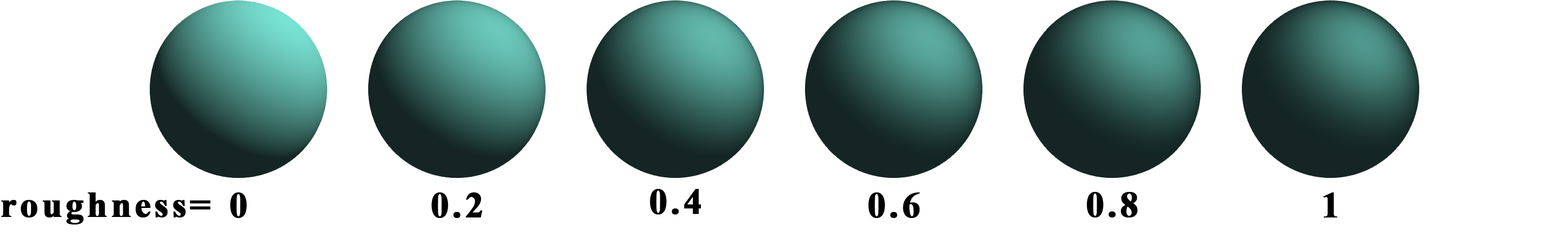
<style>
.page{position:relative;width:1568px;height:234px;background:#ffffff}
.page>*{position:absolute;margin:0}
.t1{font:36.1px "TimesNewRomanPS-BoldMT";letter-spacing:0.075em;color:#000000;font-weight:bold}
</style>
<div class="page">
<p class="t1" style="left:1px;top:192px;width:209px;height:32px">roughness=</p>
<p class="t1" style="left:230px;top:192px;width:17px;height:26px">0</p>
<p class="t1" style="left:431px;top:192px;width:51px;height:26px">0.2</p>
<p class="t1" style="left:650px;top:189px;width:51px;height:25px">0.4</p>
<p class="t1" style="left:868px;top:192px;width:52px;height:26px">0.6</p>
<p class="t1" style="left:1087px;top:192px;width:51px;height:25px">0.8</p>
<p class="t1" style="left:1323px;top:192px;width:15px;height:25px">1</p>
</div>
